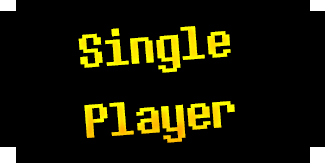
<style>
.page{position:relative;width:325px;height:163px;background:#000000}
.page>*{position:absolute;margin:0}
.t1{font:58.5px "8bitoperator-JVE";color:#ffed00}
</style>
<div class="page">
<p class="t1" style="left:78px;top:26px;width:157px;height:117px;rotate:-4deg">Single Player</p>
</div>
